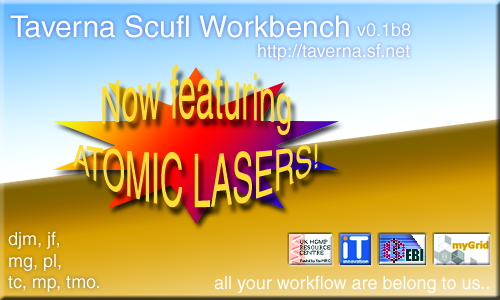
<style>
.page{position:relative;width:500px;height:300px}
.page>*{position:absolute;margin:0}
.t1{font:30px "Helvetica";color:#ffffff}
.t2{font:18px "Helvetica";color:#ffffff}
.t3{font:30px "Helvetica";color:#fdde35}
</style>
<div class="page">
<p class="t1" style="left:10px;top:15px;width:339px;height:23px">Taverna Scufl Workbench</p>
<p class="t2" style="left:357px;top:23px;width:54px;height:14px">v0.1b8</p>
<p class="t2" style="left:258px;top:43px;width:152px;height:18px">http://taverna.sf.net</p>
<p class="t3" style="left:72px;top:64px;width:246px;height:144px;text-align:center">Now featuring<br>ATOMIC LASERS!</p>
<p class="t2" style="left:8px;top:231px;width:91px;height:61px">djm, jf,<br>mg, pl,<br>tc, mp, tmo.</p>
<p class="t2" style="left:214px;top:275px;width:275px;height:18px">all your workflow are belong to us..</p>
</div>
